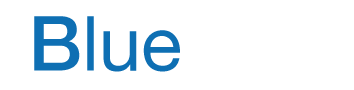
<style>
.page{position:relative;width:354px;height:90px;background:#ffffff}
.page>*{position:absolute;margin:0}
.t1{font:76px "HelveticaNeue";color:#0e6fb3}
.t2{font:76px "HelveticaNeue-Medium";color:#0e6fb3}
</style>
<div class="page">
<p class="t1" style="left:34px;top:16px;width:146px;height:56px"><span class="t2">B</span>lue</p>
</div>
